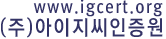
<style>
.page{position:relative;width:166px;height:39px;background:#ffffff}
.page>*{position:absolute;margin:0}
.t1{font:17.4px "RixGoB";letter-spacing:0.1em;color:#333366;scale:0.9 1}
.t2{font:20.8px "RixGoB";letter-spacing:0.1em;color:#333366;scale:0.9 1}
</style>
<div class="page">
<p class="t1" style="left:33px;top:0px;width:130px;height:17px">www.igcert.org</p>
<p class="t2" style="left:1px;top:17px;width:162px;height:21px">(주)아이지씨인증원</p>
</div>
